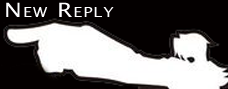
<style>
.page{position:relative;width:228px;height:89px;background:#040000}
.page>*{position:absolute;margin:0}
.t1{font:19.7px "LucidaSansUnicode";letter-spacing:0.05em;color:#fefeff;font-variant:small-caps;scale:1.22 1}
</style>
<div class="page">
<p class="t1" style="left:6px;top:2px;width:108px;height:15px">New Reply</p>
</div>
